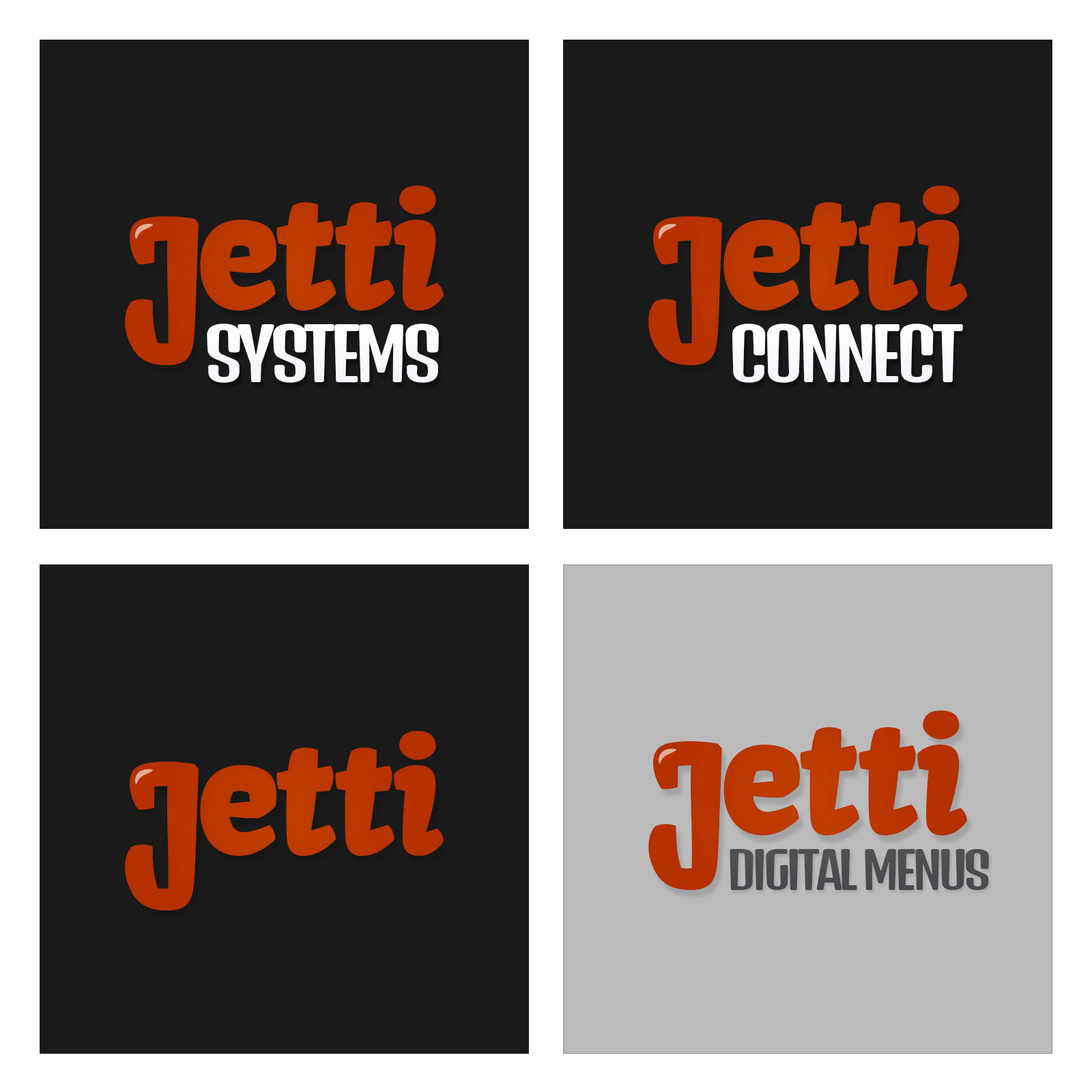
<style>
.page{position:relative;width:1092px;height:1092px;background:#1a1a1a}
.page>*{position:absolute;margin:0}
.t1{font:154.6px "Kavoon-Regular";letter-spacing:-0.08em;color:#c64600}
.t2{font:154.6px "Kavoon-Regular";letter-spacing:-0.04em;color:#c64600}
.t3{font:154.6px "Kavoon-Regular";letter-spacing:-0.013em;color:#c64600}
.t4{font:154.6px "Kavoon-Regular";letter-spacing:-0.02em;color:#c64600}
.t5{font:69.7px "DenkOne-Regular";letter-spacing:-0.08em;color:#ffffff;text-transform:uppercase}
.t6{font:49px "DenkOne-Regular";letter-spacing:-0.08em;color:#484848;text-transform:uppercase}
</style>
<div class="page">
<p class="t1" style="left:125px;top:186px;width:319px;height:180px">J<span class="t2">e</span><span class="t3">t</span><span class="t4">t</span><span class="t2">i</span></p>
<p class="t1" style="left:648px;top:186px;width:319px;height:180px">J<span class="t2">e</span><span class="t3">t</span><span class="t4">t</span><span class="t2">i</span></p>
<p class="t5" style="left:207px;top:324px;width:232px;height:59px">systems</p>
<p class="t5" style="left:732px;top:324px;width:231px;height:59px">CONNECT</p>
<p class="t1" style="left:648px;top:710px;width:319px;height:181px">J<span class="t2">e</span><span class="t3">t</span><span class="t4">t</span><span class="t2">i</span></p>
<p class="t1" style="left:125px;top:731px;width:319px;height:180px">J<span class="t2">e</span><span class="t3">t</span><span class="t4">t</span><span class="t2">i</span></p>
<p class="t6" style="left:730px;top:849px;width:259px;height:41px">DIGITAL MENUS</p>
</div>
